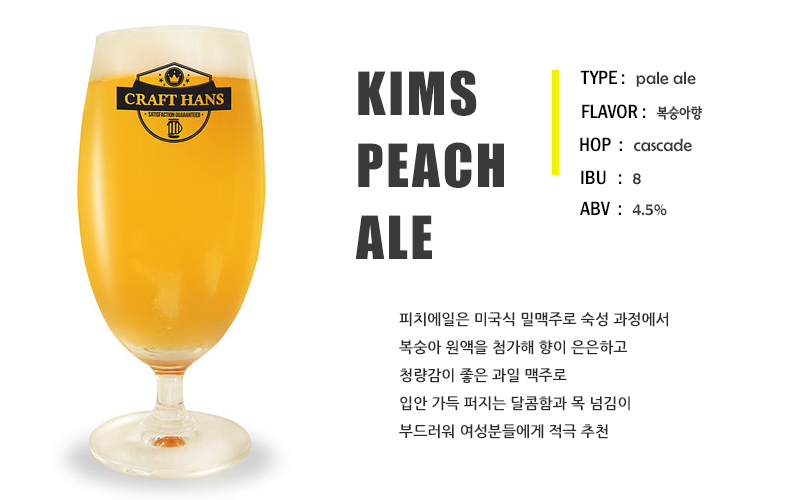
<style>
.page{position:relative;width:800px;height:500px;background:#ffffff}
.page>*{position:absolute;margin:0}
.t1{font:55px/72px "Impact";letter-spacing:0.05em;color:#3a3a3a}
.t2{font:18px "BerlinSansFB-Reg";color:#3a3a3a}
.t3{font:20px "FranklinGothic-MediumCond";color:#000000}
.t4{font:14px "SeN-CBL";color:#3a3a3a}
.t5{font:15px/28px "NanumGothicBold";color:#2b2b2b}
</style>
<div class="page">
<p class="t1" style="left:355px;top:70px;width:149px;height:189px">KIMS<br>PEACH<br>ALE</p>
<p class="t2" style="left:580px;top:70px;width:116px;height:17px"><span class="t3">TYPE :  </span>pale ale</p>
<p class="t3" style="left:582px;top:104px;width:120px;height:16px">FLAVOR :  <span class="t4">복숭아향</span></p>
<p class="t2" style="left:580px;top:137px;width:112px;height:15px"><span class="t3">HOP  :  </span>cascade</p>
<p class="t3" style="left:581px;top:170px;width:60px;height:15px">IBU   :  <span class="t2">8</span></p>
<p class="t3" style="left:580px;top:201px;width:87px;height:15px">ABV  :  <span class="t2">4.5%</span></p>
<p class="t5" style="left:399px;top:312px;width:269px;height:127px">피치에일은 미국식 밀맥주로 숙성 과정에서 <br>복숭아 원액을 첨가해 향이 은은하고 <br>청량감이 좋은 과일 맥주로 <br>입안 가득 퍼지는 달콤함과 목 넘김이 <br>부드러워 여성분들에게 적극 추천</p>
</div>
